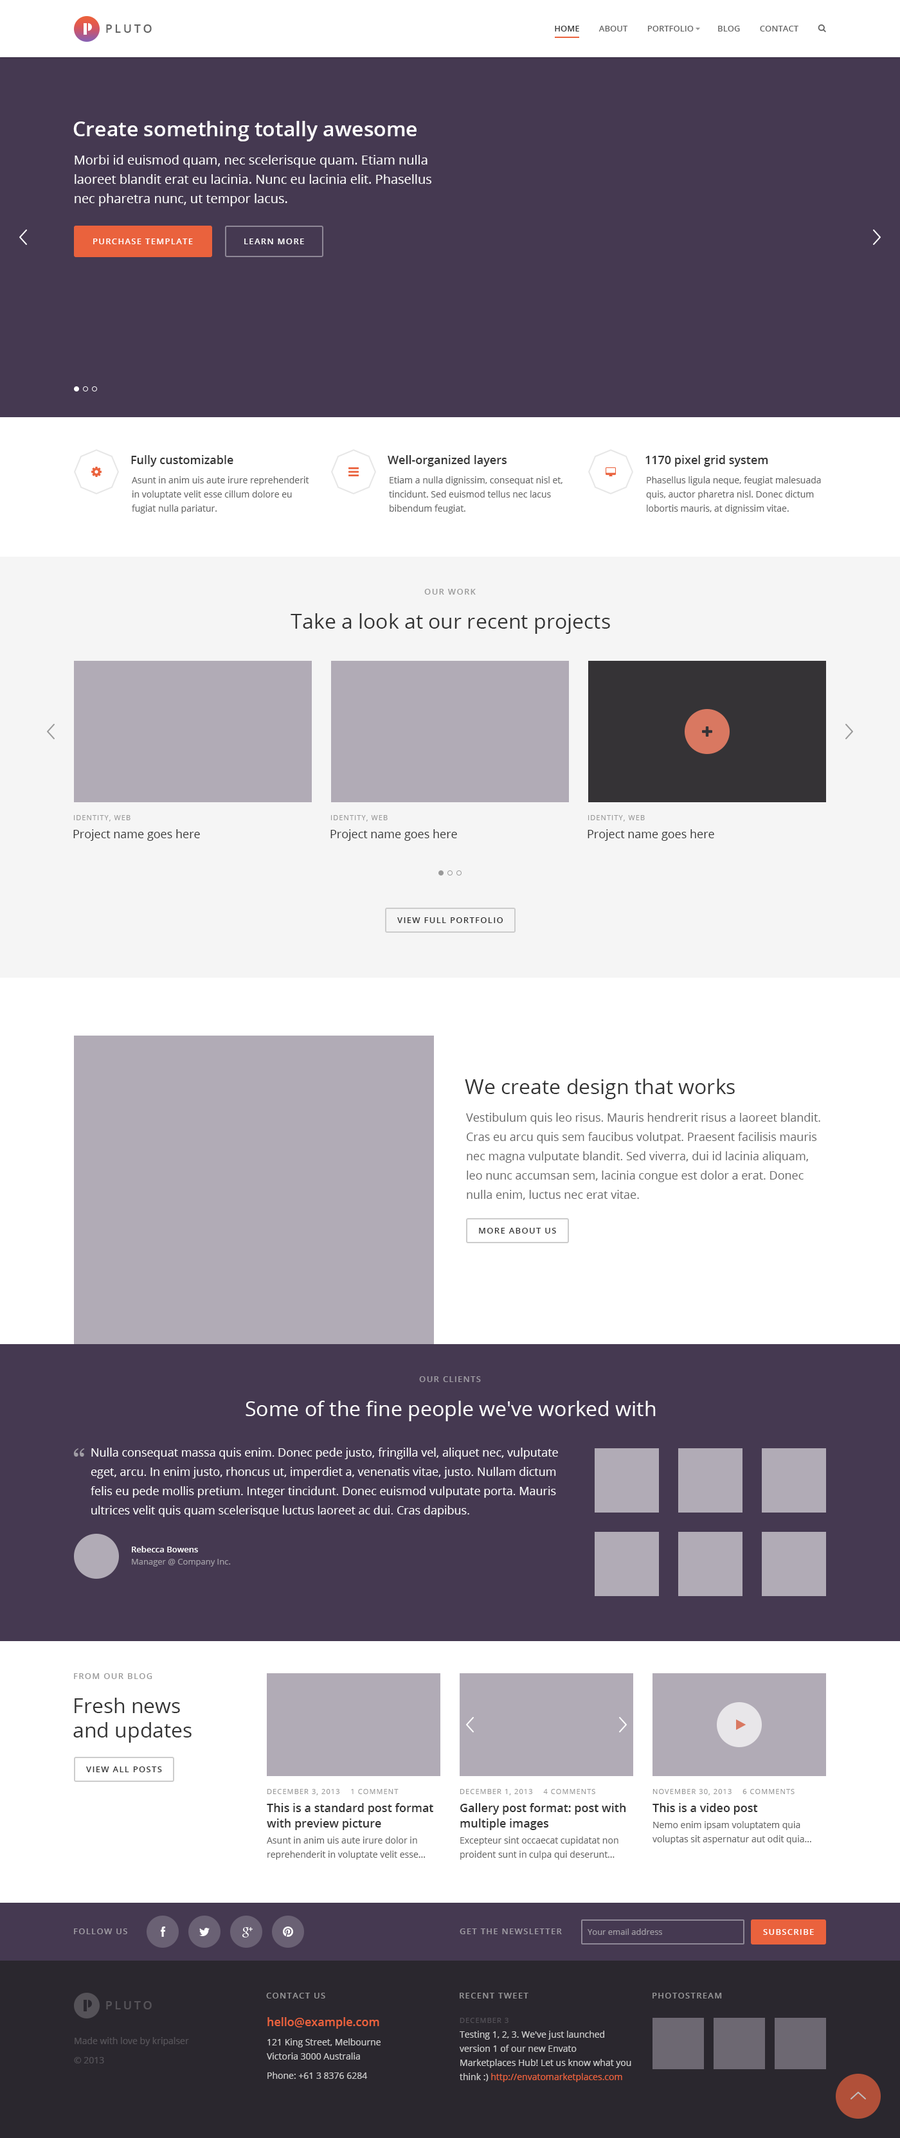
<style>
.page{position:relative;width:900px;height:2138px;background:#ffffff}
.page>*{position:absolute;margin:0}
.t1{font:11.6px "OpenSans-Semibold";letter-spacing:0.2em;color:#666666;text-transform:uppercase}
.t2{font:8.4px "OpenSans-Semibold";color:#666666;text-transform:uppercase}
.t3{font:8.4px "OpenSans-Semibold";color:#333333;text-transform:uppercase}
.t4{font:20.6px "OpenSans-Semibold";color:#ffffff}
.t5{font:12.9px/19.3px "OpenSans";color:#ffffff}
.t6{font:8.4px "OpenSans-Semibold";letter-spacing:0.1em;color:#ffffff;text-transform:uppercase}
.t7{font:11.6px "OpenSans-Semibold";color:#333333}
.t8{font:9px/14.1px "OpenSans";color:#666666}
.t9{font:8.4px "OpenSans-Semibold";letter-spacing:0.1em;color:#999999;text-transform:uppercase}
.t10{font:20.6px "OpenSans";color:#333333}
.t11{font:7.1px "OpenSans";letter-spacing:0.1em;color:#999999;text-transform:uppercase}
.t12{font:11.6px "OpenSans";color:#333333}
.t13{font:8.4px "OpenSans-Semibold";letter-spacing:0.1em;color:#333333;text-transform:uppercase}
.t14{font:11.6px/19.3px "OpenSans";color:#666666}
.t15{font:8.4px "OpenSans-Semibold";letter-spacing:0.1em;color:#a09ca4;text-transform:uppercase}
.t16{font:20.6px "OpenSans";color:#ffffff}
.t17{font:32.1px "Georgia";color:#a09ca4}
.t18{font:11.6px/19.3px "OpenSans";color:#ffffff}
.t19{font:8.4px "OpenSans-Semibold";color:#ffffff}
.t20{font:8.4px "OpenSans";color:#a09ca4}
.t21{font:11.6px/15.4px "OpenSans-Semibold";color:#333333}
.t22{font:8.4px "OpenSans-Semibold";letter-spacing:0.1em;color:#979698;text-transform:uppercase}
.t23{font:11.6px "OpenSans-Semibold";letter-spacing:0.2em;color:#555258;text-transform:uppercase}
.t24{font:9px/19.3px "OpenSans";color:#cccccc}
.t25{font:11.6px/15.4px "OpenSans-Semibold";color:#ea623d}
.t26{font:9px/14.1px "OpenSans";color:#cccccc}
.t27{font:7.1px "OpenSans";letter-spacing:0.1em;color:#545158;text-transform:uppercase}
.t28{font:9px/14.8px "OpenSans";color:#cccccc}
.t29{font:9px/14.1px "OpenSans";color:#ea623d}
.t30{font:9px/19.3px "OpenSans";color:#555258}
</style>
<div class="page">
<p class="t1" style="left:106px;top:24px;width:46px;height:9px">Pluto</p>
<p class="t2" style="left:555px;top:26px;width:243px;height:6px"><span class="t3">Home         </span>About         Portfolio           Blog         Contact</p>
<p class="t4" style="left:73px;top:121px;width:344px;height:20px">Create something totally awesome</p>
<p class="t5" style="left:75px;top:155px;width:356px;height:51px">Morbi id euismod quam, nec scelerisque quam. Etiam nulla laoreet blandit erat eu lacinia. Nunc eu lacinia elit. Phasellus nec pharetra nunc, ut tempor lacus.</p>
<p class="t6" style="left:93px;top:239px;width:100px;height:5px">Purchase template</p>
<p class="t6" style="left:244px;top:239px;width:60px;height:5px">Learn more</p>
<p class="t7" style="left:131px;top:455px;width:102px;height:12px">Fully customizable</p>
<p class="t7" style="left:388px;top:455px;width:119px;height:12px">Well-organized layers</p>
<p class="t7" style="left:645px;top:455px;width:123px;height:12px">1170 pixel grid system</p>
<p class="t8" style="left:132px;top:476px;width:177px;height:38px">Asunt in anim uis aute irure reprehenderit in voluptate velit esse cillum dolore eu fugiat nulla pariatur.</p>
<p class="t8" style="left:389px;top:476px;width:173px;height:38px">Etiam a nulla dignissim, consequat nisl et, tincidunt. Sed euismod tellus nec lacus bibendum feugiat.</p>
<p class="t8" style="left:646px;top:476px;width:175px;height:38px">Phasellus ligula neque, feugiat malesuada quis, auctor pharetra nisl. Donec dictum lobortis mauris, at dignissim vitae.</p>
<p class="t9" style="left:424px;top:589px;width:52px;height:6px">Our work</p>
<p class="t10" style="left:291px;top:613px;width:319px;height:21px">Take a look at our recent projects</p>
<p class="t11" style="left:74px;top:815px;width:56px;height:7px">Identity, Web</p>
<p class="t11" style="left:331px;top:815px;width:57px;height:7px">Identity, Web</p>
<p class="t11" style="left:588px;top:815px;width:57px;height:7px">Identity, Web</p>
<p class="t12" style="left:73px;top:829px;width:127px;height:12px">Project name goes here</p>
<p class="t12" style="left:330px;top:829px;width:127px;height:12px">Project name goes here</p>
<p class="t12" style="left:588px;top:829px;width:126px;height:12px">Project name goes here</p>
<p class="t13" style="left:397px;top:917px;width:106px;height:6px">View full portfolio</p>
<p class="t10" style="left:465px;top:1079px;width:270px;height:20px">We create design that works</p>
<p class="t14" style="left:466px;top:1113px;width:354px;height:87px">Vestibulum quis leo risus. Mauris hendrerit risus a laoreet blandit. Cras eu arcu quis sem faucibus volutpat. Praesent facilisis mauris nec magna vulputate blandit. Sed viverra, dui id lacinia aliquam, leo nunc accumsan sem, lacinia congue est dolor a erat. Donec nulla enim, luctus nec erat vitae.</p>
<p class="t13" style="left:479px;top:1228px;width:77px;height:6px">More about us</p>
<p class="t15" style="left:419px;top:1376px;width:62px;height:6px">Our clients</p>
<p class="t16" style="left:246px;top:1401px;width:410px;height:20px">Some of the fine people we've worked with</p>
<p class="t17" style="left:73px;top:1448px;width:12px;height:9px">“</p>
<p class="t18" style="left:91px;top:1448px;width:467px;height:69px">Nulla consequat massa quis enim. Donec pede justo, fringilla vel, aliquet nec, vulputate eget, arcu. In enim justo, rhoncus ut, imperdiet a, venenatis vitae, justo. Nullam dictum felis eu pede mollis pretium. Integer tincidunt. Donec euismod vulputate porta. Mauris ultrices velit quis quam scelerisque luctus laoreet ac dui. Cras dapibus.</p>
<p class="t19" style="left:132px;top:1546px;width:66px;height:7px">Rebecca Bowens</p>
<p class="t20" style="left:132px;top:1559px;width:99px;height:8px">Manager @ Company Inc.</p>
<p class="t9" style="left:74px;top:1673px;width:78px;height:6px">From our blog</p>
<p class="t10" style="left:73px;top:1698px;width:119px;height:45px">Fresh news<br>and updates</p>
<p class="t13" style="left:86px;top:1767px;width:76px;height:5px">View all posts</p>
<p class="t11" style="left:267px;top:1789px;width:132px;height:7px">December 3, 2013    1 comment</p>
<p class="t11" style="left:460px;top:1789px;width:135px;height:7px">December 1, 2013    4 comments</p>
<p class="t11" style="left:652px;top:1789px;width:143px;height:7px">November 30, 2013    6 comments</p>
<p class="t21" style="left:267px;top:1803px;width:166px;height:27px">This is a standard post format with preview picture</p>
<p class="t21" style="left:460px;top:1803px;width:166px;height:27px">Gallery post format: post with multiple images</p>
<p class="t7" style="left:652px;top:1803px;width:106px;height:12px">This is a video post</p>
<p class="t8" style="left:652px;top:1821px;width:159px;height:23px">Nemo enim ipsam voluptatem quia voluptas sit aspernatur aut odit quia...</p>
<p class="t8" style="left:267px;top:1837px;width:158px;height:23px">Asunt in anim uis aute irure dolor in reprehenderit in voluptate velit esse...</p>
<p class="t8" style="left:460px;top:1837px;width:158px;height:23px">Excepteur sint occaecat cupidatat non proident sunt in culpa qui deserunt...</p>
<p class="t15" style="left:74px;top:1929px;width:53px;height:5px">Follow us</p>
<p class="t15" style="left:460px;top:1929px;width:102px;height:5px">Get the newsletter</p>
<p class="t20" style="left:588px;top:1929px;width:74px;height:6px">Your email address</p>
<p class="t6" style="left:763px;top:1929px;width:51px;height:6px">Subscribe</p>
<p class="t22" style="left:266px;top:1993px;width:59px;height:6px">Contact us</p>
<p class="t22" style="left:460px;top:1993px;width:68px;height:6px">Recent tweet</p>
<p class="t22" style="left:652px;top:1993px;width:70px;height:6px">Photostream</p>
<p class="t23" style="left:106px;top:2001px;width:46px;height:9px">Pluto</p>
<p class="t24" style="left:267px;top:2017px;width:114px;height:62px"><span class="t25">hello@example.com<br></span>121 King Street, Melbourne <br><span class="t26">Victoria 3000 Australia<br></span>Phone: +61 3 8376 6284</p>
<p class="t27" style="left:460px;top:2018px;width:49px;height:5px">December 3</p>
<p class="t26" style="left:460px;top:2031px;width:171px;height:51px"><span class="t28">Testing 1, 2, 3. We've just launched </span>version 1 of our new Envato Marketplaces Hub! Let us know what you think :) <span class="t29">http://envatomarketplaces.com</span></p>
<p class="t30" style="left:74px;top:2037px;width:115px;height:27px">Made with love by kripalser<br>© 2013</p>
</div>
